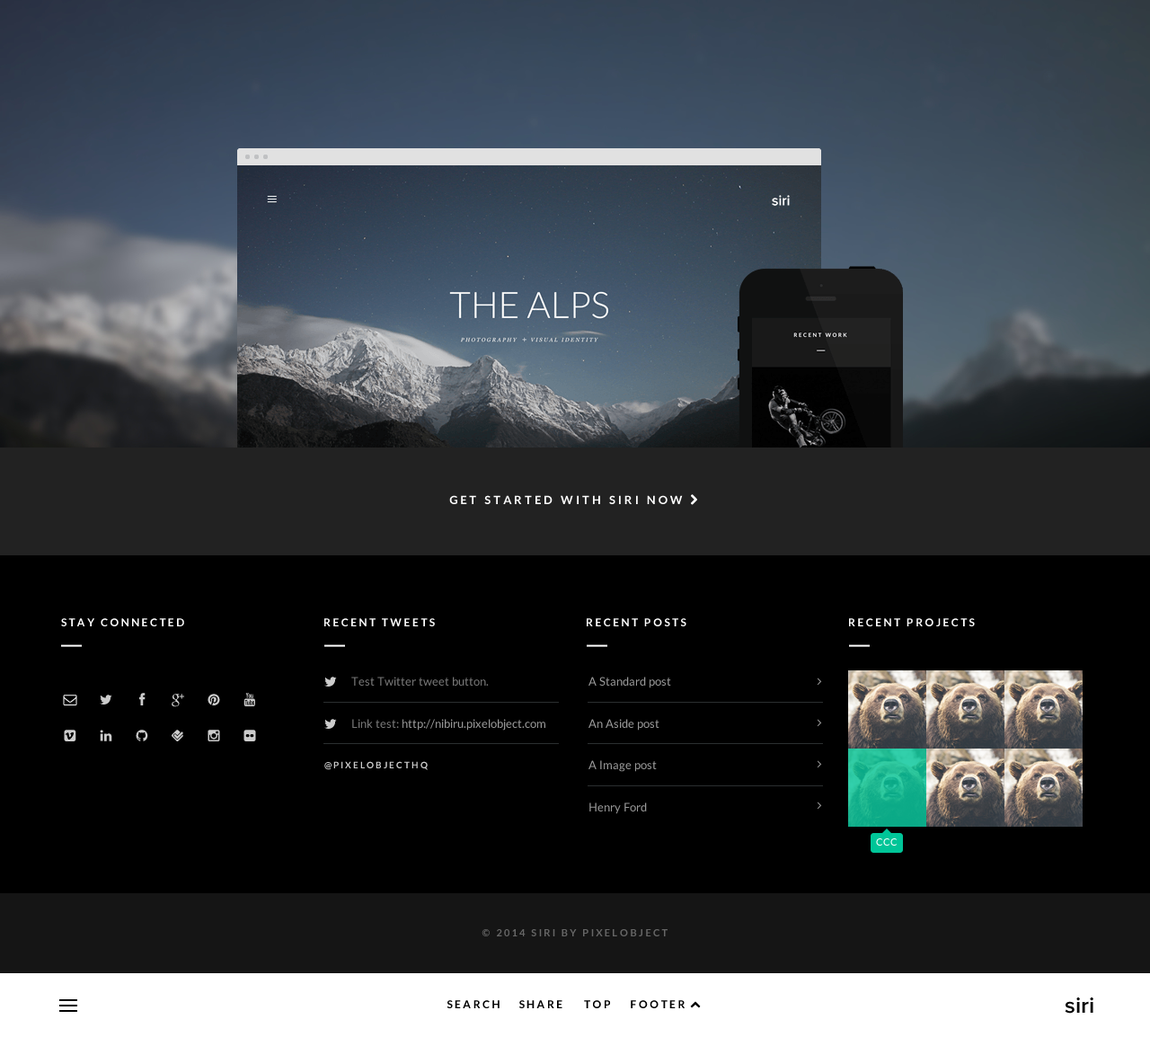
<style>
.page{position:relative;width:1150px;height:1037px;background:#000000}
.page>*{position:absolute;margin:0}
.t1{font:11.7px "Lato-Bold";letter-spacing:0.229em;color:#ffffff}
.t2{font:10.8px "Lato-Bold";letter-spacing:0.2em;color:#ffffff}
.t3{font:11.7px "Lato-Regular";color:#777777}
.t4{font:11.7px "Lato-Regular";color:#999999}
.t5{font:9px "Lato-Bold";letter-spacing:0.2em;color:#cccccc}
.t6{font:9.9px "Lato-Regular";color:#ffffff}
.t7{font:9.9px "Lato-Bold";letter-spacing:0.229em;color:#666666}
.t8{font:10.8px "Lato-Bold";letter-spacing:0.2em;color:#000000}
.t9{font:22.5px "ProximaNova-Semibold";color:#000000}
</style>
<div class="page">
<p class="t1" style="left:449px;top:495px;width:234px;height:9px">GET STARTED WITH SIRI NOW</p>
<p class="t2" style="left:61px;top:618px;width:123px;height:8px">STAY CONNECTED</p>
<p class="t2" style="left:324px;top:618px;width:111px;height:8px">RECENT TWEETS</p>
<p class="t2" style="left:587px;top:618px;width:99px;height:8px">RECENT POSTS</p>
<p class="t2" style="left:849px;top:618px;width:126px;height:8px">RECENT PROJECTS</p>
<p class="t3" style="left:351px;top:677px;width:138px;height:9px">Test Twitter tweet button.</p>
<p class="t4" style="left:589px;top:677px;width:82px;height:11px">A Standard post</p>
<p class="t4" style="left:352px;top:719px;width:193px;height:11px"><span class="t3">Link test: </span>http://nibiru.pixelobject.com</p>
<p class="t4" style="left:589px;top:719px;width:70px;height:11px">An Aside post</p>
<p class="t5" style="left:324px;top:761px;width:104px;height:9px">@PIXELOBJECTHQ</p>
<p class="t4" style="left:589px;top:760px;width:68px;height:12px">A Image post</p>
<p class="t4" style="left:589px;top:802px;width:58px;height:12px">Henry Ford</p>
<p class="t6" style="left:876px;top:838px;width:21px;height:7px">CCC</p>
<p class="t7" style="left:482px;top:929px;width:186px;height:7px">© 2014 SIRI BY PIXELOBJECT</p>
<p class="t8" style="left:447px;top:1000px;width:53px;height:8px">SEARCH</p>
<p class="t8" style="left:519px;top:1000px;width:43px;height:8px">SHARE</p>
<p class="t8" style="left:584px;top:1000px;width:26px;height:8px">TOP</p>
<p class="t8" style="left:631px;top:1000px;width:54px;height:8px">FOOTER</p>
<p class="t9" style="left:1065px;top:997px;width:28px;height:16px">siri</p>
</div>
